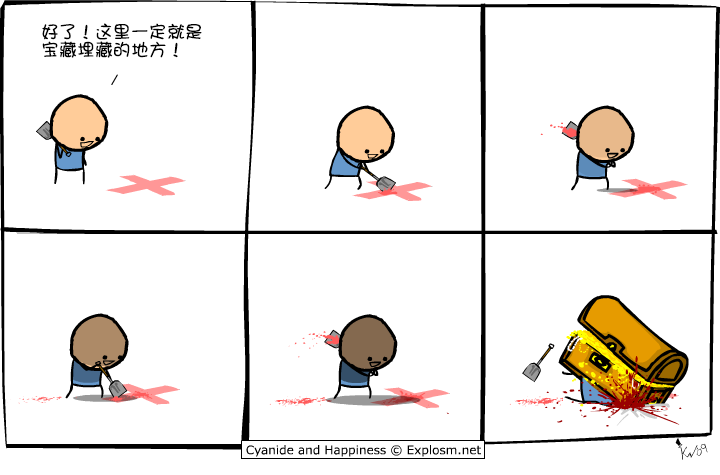
<style>
.page{position:relative;width:720px;height:475px;background:#ffffff}
.page>*{position:absolute;margin:0}
.t1{font:18px/18px "DFGirl";color:#000000}
</style>
<div class="page">
<p class="t1" style="left:42px;top:23px;width:160px;height:35px">好了！这里一定就是<br>宝藏埋藏的地方！</p>
</div>
